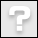
<style>
.page{position:relative;width:38px;height:38px;background:#e8e8e8}
.page>*{position:absolute;margin:0}
.t1{font:30px "RFGSanSrf-Bd-83pv-RKSJ-H";color:#ffffff}
</style>
<div class="page">
<p class="t1" style="left:9px;top:6px;width:22px;height:25px">?</p>
</div>
